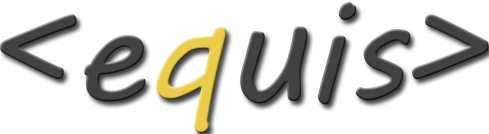
<style>
.page{position:relative;width:489px;height:134px;background:#ffffff}
.page>*{position:absolute;margin:0}
.t1{font:148.9px "MVBoli";color:#424242}
.t2{font:148.9px "MVBoli";color:#ebcc49}
</style>
<div class="page">
<p class="t1" style="left:0px;top:2px;width:489px;height:132px">&lt;e<span class="t2">q</span>uis&gt;</p>
</div>
